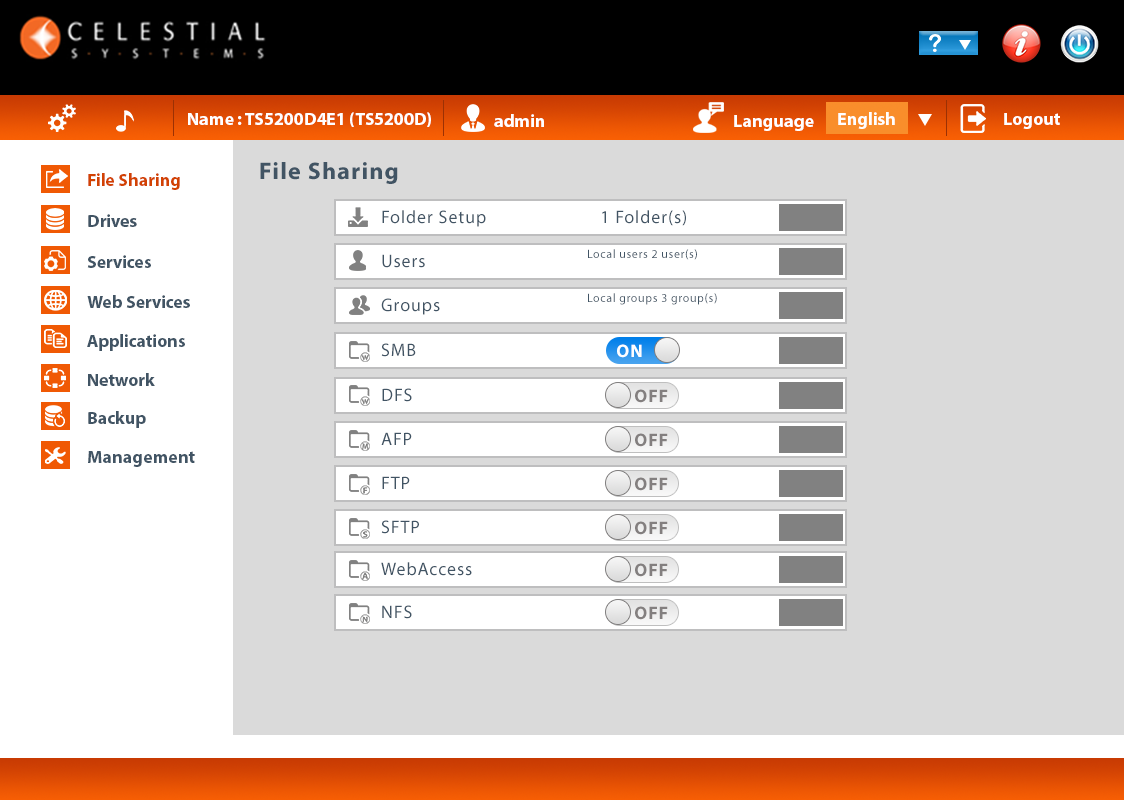
<style>
.page{position:relative;width:1124px;height:800px;background:#dadada}
.page>*{position:absolute;margin:0}
.t1{font:17.8px "MyriadPro-Bold";letter-spacing:-0.005em;color:#ffffff}
.t2{font:17.8px "MyriadPro-Bold";letter-spacing:-0.005em;color:#d24203}
.t3{font:24px "MyriadPro-Bold";letter-spacing:0.05em;color:#415464}
.t4{font:17.8px "MyriadPro-Bold";letter-spacing:-0.005em;color:#415464}
.t5{font:18px "MyriadPro-Regular";letter-spacing:0.05em;color:#415464}
.t6{font:12px "MyriadPro-Regular";letter-spacing:0.05em;color:#415464}
.t7{font:18px "MyriadPro-Bold";letter-spacing:0.05em;color:#ffffff}
.t8{font:18px "MyriadPro-Bold";letter-spacing:0.05em;color:#837f7f}
</style>
<div class="page">
<p class="t1" style="left:188px;top:112px;width:243px;height:15px">Name : TS5200D4E1 (TS5200D)</p>
<p class="t1" style="left:838px;top:112px;width:57px;height:17px">English</p>
<p class="t1" style="left:1004px;top:113px;width:56px;height:16px">Logout</p>
<p class="t1" style="left:494px;top:114px;width:50px;height:13px">admin</p>
<p class="t1" style="left:734px;top:115px;width:80px;height:16px">Language</p>
<p class="t2" style="left:88px;top:173px;width:92px;height:17px">File Sharing</p>
<p class="t3" style="left:260px;top:162px;width:138px;height:22px">File Sharing</p>
<p class="t4" style="left:88px;top:214px;width:49px;height:13px">Drives</p>
<p class="t5" style="left:382px;top:210px;width:304px;height:17px">Folder Setup                        1 Folder(s)</p>
<p class="t4" style="left:87px;top:255px;width:64px;height:13px">Services</p>
<p class="t5" style="left:382px;top:254px;width:43px;height:14px">Users</p>
<p class="t6" style="left:588px;top:249px;width:109px;height:11px">Local users 2 user(s)</p>
<p class="t6" style="left:588px;top:293px;width:129px;height:12px">Local groups 3 group(s)</p>
<p class="t4" style="left:87px;top:295px;width:103px;height:13px">Web Services</p>
<p class="t5" style="left:381px;top:298px;width:59px;height:17px">Groups</p>
<p class="t4" style="left:87px;top:334px;width:98px;height:17px">Applications</p>
<p class="t5" style="left:381px;top:343px;width:35px;height:14px">SMB</p>
<p class="t7" style="left:617px;top:344px;width:25px;height:14px">ON</p>
<p class="t4" style="left:88px;top:373px;width:67px;height:13px">Network</p>
<p class="t5" style="left:382px;top:388px;width:30px;height:14px">DFS</p>
<p class="t8" style="left:635px;top:389px;width:33px;height:14px">OFF</p>
<p class="t4" style="left:88px;top:411px;width:58px;height:17px">Backup</p>
<p class="t5" style="left:381px;top:432px;width:31px;height:13px">AFP</p>
<p class="t8" style="left:635px;top:433px;width:33px;height:14px">OFF</p>
<p class="t4" style="left:88px;top:451px;width:107px;height:16px">Management</p>
<p class="t5" style="left:382px;top:476px;width:28px;height:13px">FTP</p>
<p class="t8" style="left:635px;top:477px;width:33px;height:14px">OFF</p>
<p class="t5" style="left:381px;top:520px;width:38px;height:14px">SFTP</p>
<p class="t8" style="left:635px;top:521px;width:33px;height:14px">OFF</p>
<p class="t5" style="left:381px;top:562px;width:91px;height:14px">WebAccess</p>
<p class="t8" style="left:635px;top:563px;width:33px;height:14px">OFF</p>
<p class="t5" style="left:382px;top:605px;width:30px;height:14px">NFS</p>
<p class="t8" style="left:635px;top:606px;width:33px;height:14px">OFF</p>
</div>
